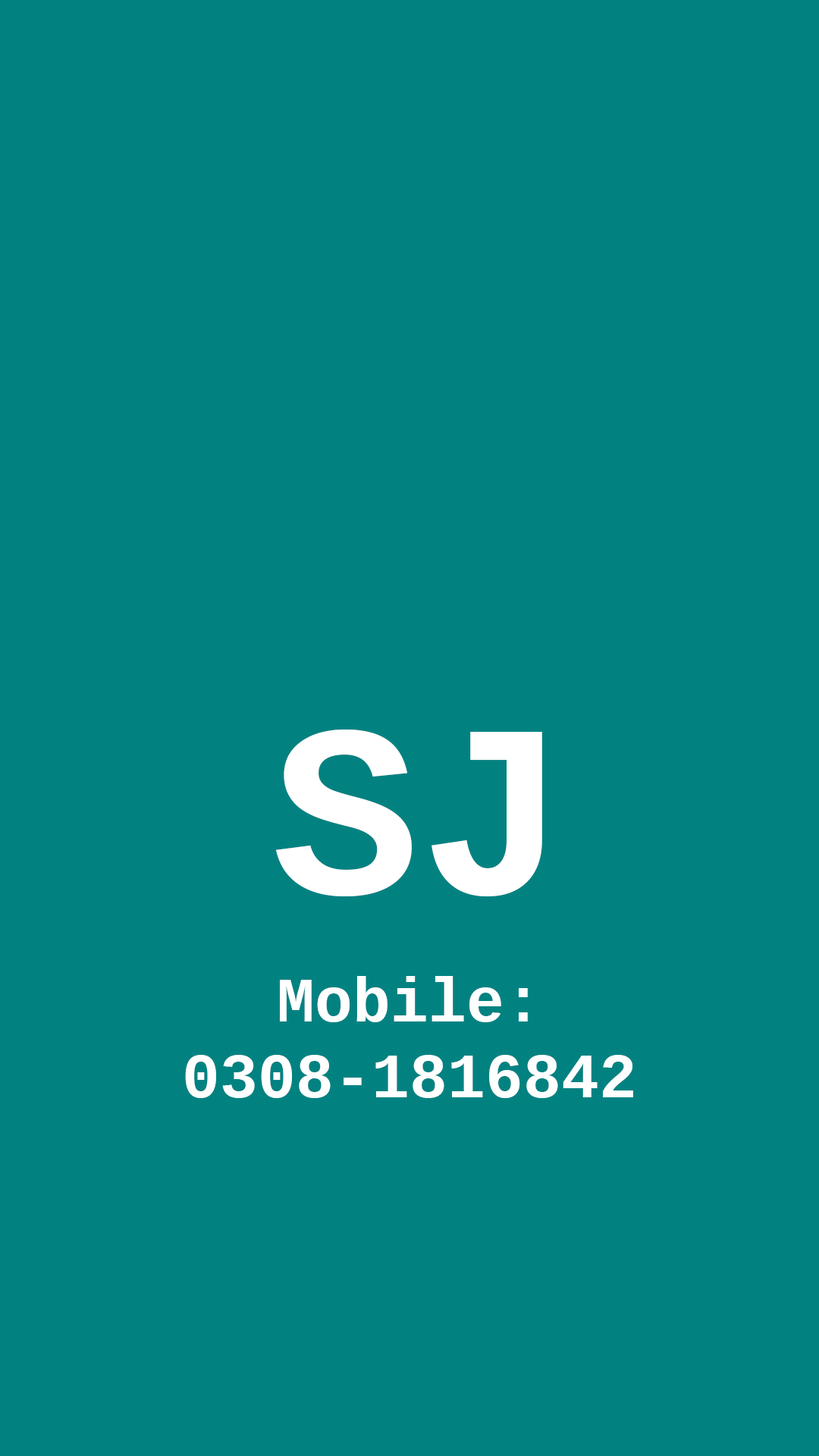
<style>
.page{position:relative;width:819px;height:1456px;background:#018281}
.page>*{position:absolute;margin:0}
.t1{font:246.7px "LiberationMono-Bold";color:#ffffff}
.t2{font:63.2px "LiberationMono-Bold";color:#ffffff}
</style>
<div class="page">
<p class="t1" style="left:276px;top:730px;width:266px;height:166px">SJ</p>
<p class="t2" style="left:185px;top:976px;width:448px;height:122px;text-align:center">Mobile:<br>0308-1816842</p>
</div>
